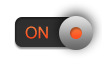
<style>
.page{position:relative;width:102px;height:62px;background:#ffffff}
.page>*{position:absolute;margin:0}
.t1{font:16px "ArialMT";color:#f9632d}
</style>
<div class="page">
<p class="t1" style="left:25px;top:26px;width:23px;height:13px">ON</p>
</div>
